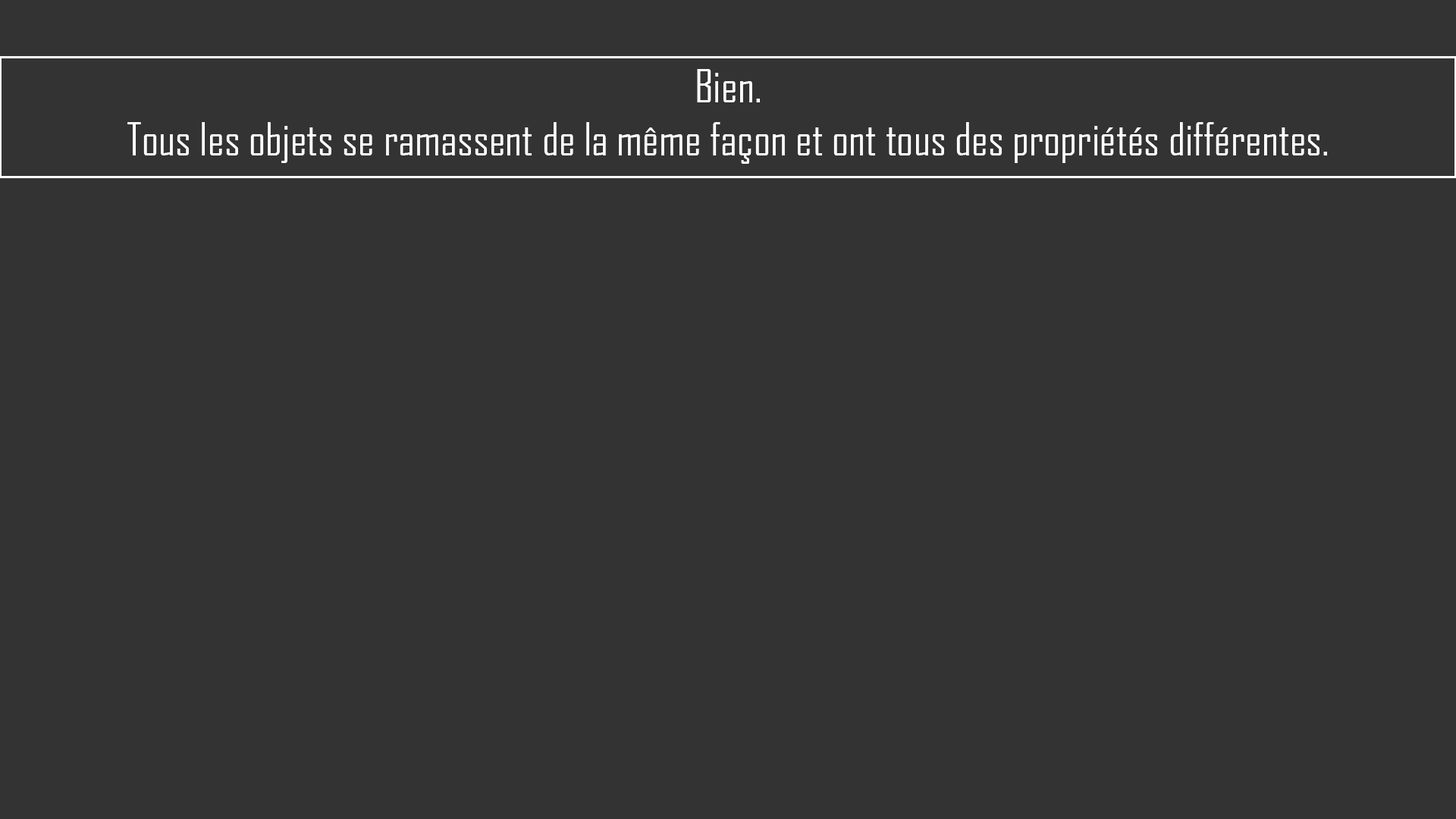
<style>
.page{position:relative;width:1456px;height:819px;background:#333333}
.page>*{position:absolute;margin:0}
.t1{font:44.2px "AgencyFB-Reg";color:#ffffff}
</style>
<div class="page">
<p class="t1" style="left:127px;top:69px;width:1200px;height:95px;text-align:center">Bien.<br>Tous les objets se ramassent de la même façon et ont tous des propriétés différentes.</p>
</div>
